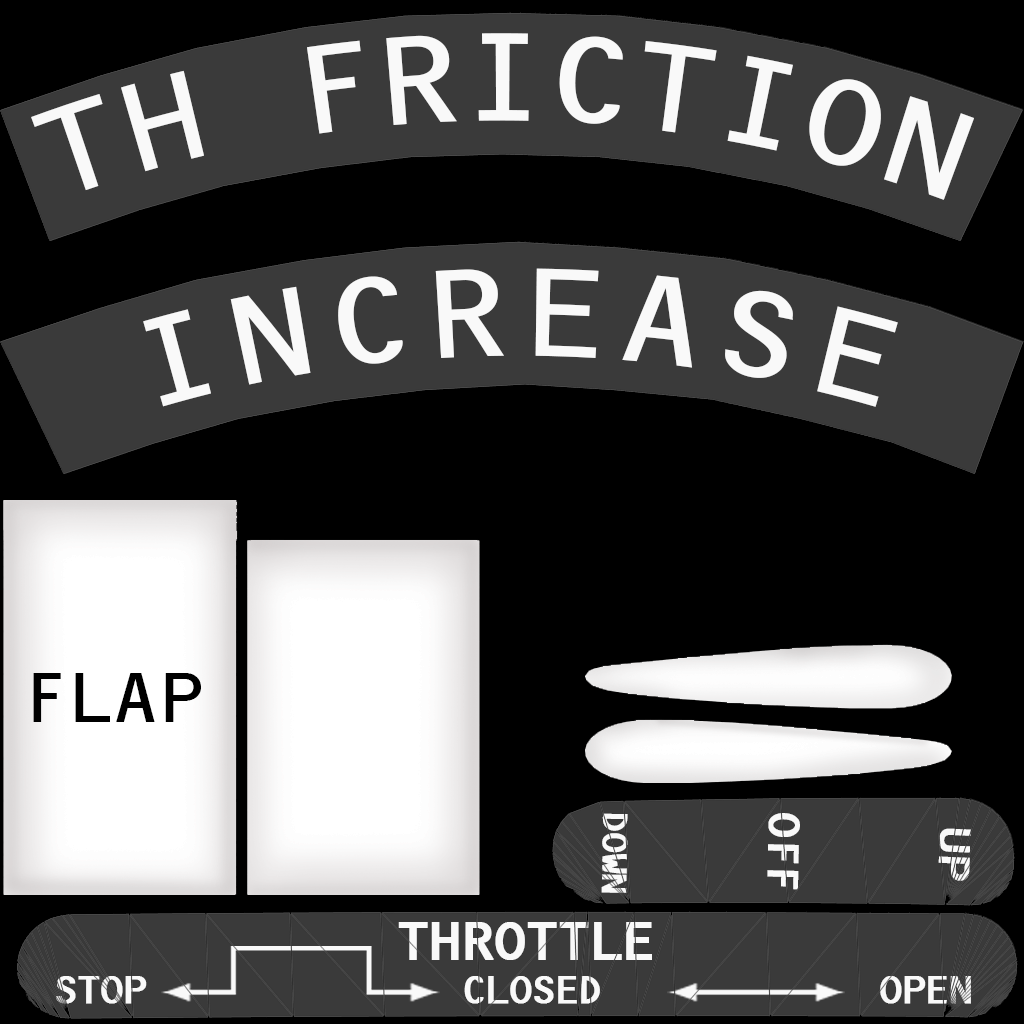
<style>
.page{position:relative;width:1024px;height:1024px;background:#000000}
.page>*{position:absolute;margin:0}
.t1{font:135.6px "OCRB";letter-spacing:-0.04em;color:#ffffff;scale:1.06 1}
.t2{font:135.6px "OCRB";letter-spacing:0.04em;color:#ffffff;scale:1.06 1}
.t3{font:76.9px "OCRB";letter-spacing:-0.04em;color:#000000;scale:1.06 1}
.t4{font:37.2px "OCRB";letter-spacing:-0.1em;color:#ffffff;font-weight:bold;scale:1.05 1}
.t5{font:47.3px "OCRB";letter-spacing:-0.1em;color:#ffffff;font-weight:bold;scale:1.05 1}
.t6{font:57.7px "OCRB";letter-spacing:-0.1em;color:#ffffff;font-weight:bold;scale:1.05 1}
.t7{font:41.8px "OCRB";letter-spacing:-0.1em;color:#ffffff;font-weight:bold;scale:1.05 1}
</style>
<div class="page">
<p class="t1" style="left:31px;top:33px;width:944px;height:167px">TH FRICTION</p>
<p class="t2" style="left:143px;top:268px;width:755px;height:139px">INCREASE</p>
<p class="t3" style="left:33px;top:673px;width:168px;height:49px">FLAP</p>
<p class="t4" style="left:601px;top:813px;width:27px;height:80px;rotate:91deg">DOWN</p>
<p class="t5" style="left:767px;top:813px;width:33px;height:77px;rotate:91deg">OFF</p>
<p class="t5" style="left:938px;top:828px;width:33px;height:53px;rotate:93deg">UP</p>
<p class="t6" style="left:398px;top:922px;width:254px;height:38px">THROTTLE</p>
<p class="t7" style="left:56px;top:976px;width:91px;height:28px">STOP</p>
<p class="t7" style="left:464px;top:976px;width:136px;height:28px">CLOSED</p>
<p class="t7" style="left:880px;top:976px;width:91px;height:28px">OPEN</p>
</div>
